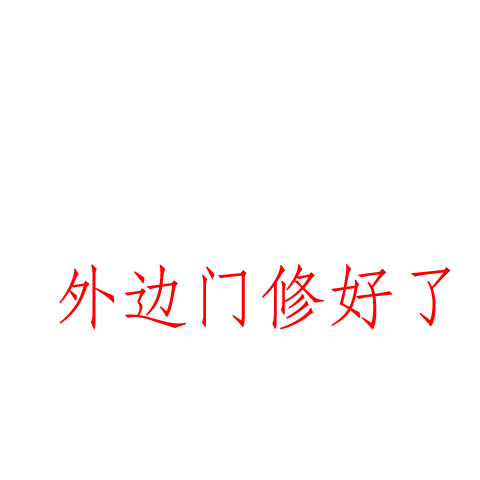
<style>
.page{position:relative;width:480px;height:480px;background:#ffffff}
.page>*{position:absolute;margin:0}
.t1{font:69px "STFangsong";color:#ff0000}
</style>
<div class="page">
<p class="t1" style="left:59px;top:264px;width:392px;height:66px">外边门修好了</p>
</div>
